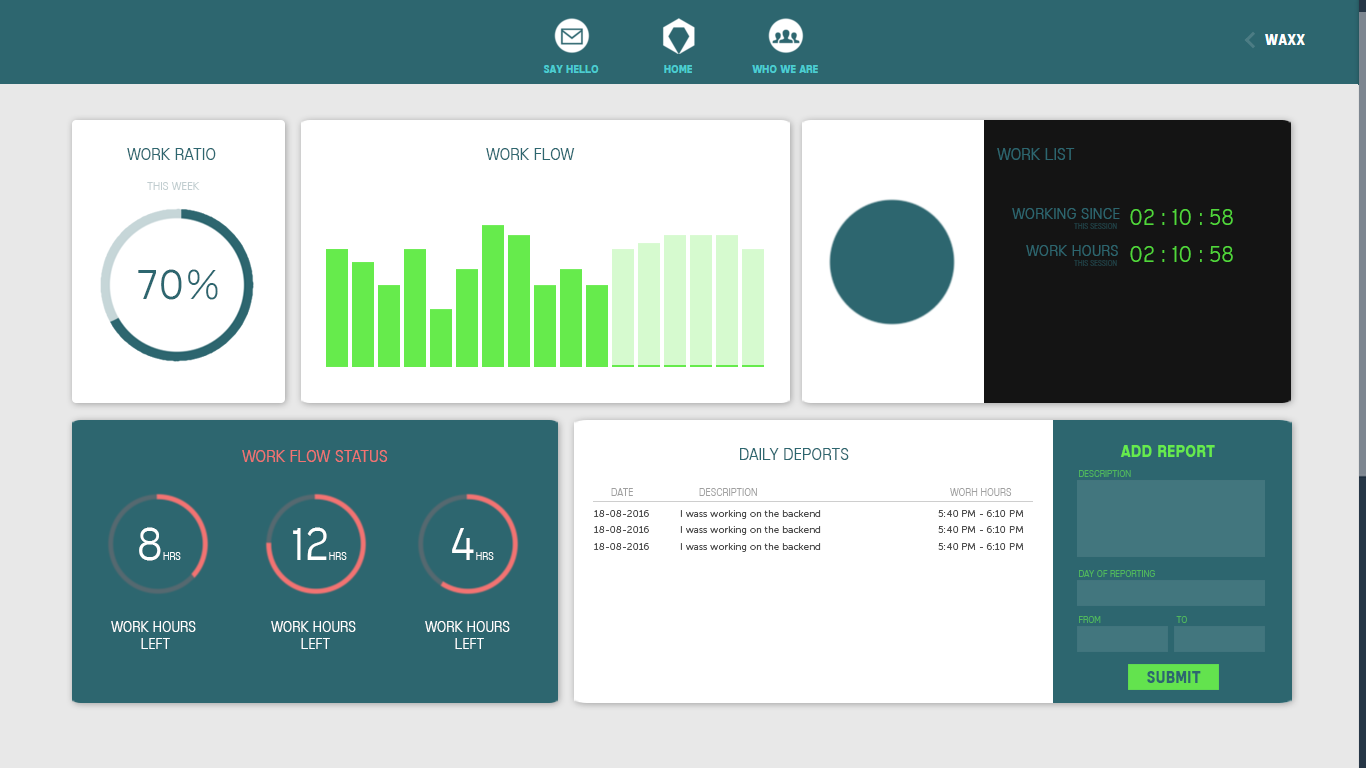
<style>
.page{position:relative;width:1366px;height:768px;background:#ffffff}
.page>*{position:absolute;margin:0}
.t1{font:16px "MixolydianTitlingLt-Regular";color:#2d666f}
.t2{font:11px "MixolydianTitlingLt-Regular";color:#c1cdd0}
.t3{font:15.2px "MixolydianTitlingLt-Regular";color:#2d666f}
.t4{font:21.2px "MixolydianTitlingLt-Regular";color:#51d73b}
.t5{font:7.2px "MixolydianTitlingLt-Regular";color:#203f44}
.t6{font:40.2px "MixolydianTitlingLt-Regular";color:#2d666f}
.t7{font:16px "MixolydianTitlingRg-Bold";color:#66eb4c}
.t8{font:16px "MixolydianTitlingLt-Regular";color:#f37372}
.t9{font:9px "MixolydianTitlingLt-Regular";color:#50b85c}
.t10{font:10px "MixolydianTitlingLt-Regular";color:#a0a0a0}
.t11{font:10px "MuseoSans-300";color:#505050}
.t12{font:10px "MixolydianTitlingLt-Regular";color:#ffffff}
.t13{font:44px "MixolydianTitlingLt-Regular";color:#ffffff}
.t14{font:14px "MixolydianTitlingLt-Regular";color:#ffffff}
.t15{font:16px "MixolydianTitlingRg-Bold";color:#2d666f}
</style>
<div class="page">
<p class="t1" style="left:127px;top:148px;width:89px;height:12px">WORK RATIO</p>
<p class="t1" style="left:486px;top:148px;width:89px;height:12px">WORK FLOW</p>
<p class="t1" style="left:997px;top:148px;width:78px;height:12px">WORK LIST</p>
<p class="t2" style="left:147px;top:182px;width:53px;height:8px">THIS WEEK</p>
<p class="t3" style="left:1012px;top:208px;width:108px;height:11px">WORKING SINCE</p>
<p class="t4" style="left:1130px;top:209px;width:103px;height:16px">02 : 10 : 58</p>
<p class="t5" style="left:1074px;top:223px;width:43px;height:6px">THIS SESSION</p>
<p class="t3" style="left:1026px;top:245px;width:92px;height:11px">WORK HOURS</p>
<p class="t4" style="left:1130px;top:246px;width:103px;height:16px">02 : 10 : 58</p>
<p class="t6" style="left:138px;top:269px;width:80px;height:31px">70%</p>
<p class="t5" style="left:1074px;top:260px;width:43px;height:6px">THIS SESSION</p>
<p class="t1" style="left:740px;top:448px;width:109px;height:12px">DAILY DEPORTS</p>
<p class="t7" style="left:1120px;top:445px;width:95px;height:12px">ADD REPORT</p>
<p class="t8" style="left:242px;top:450px;width:146px;height:12px">WORK FLOW STATUS</p>
<p class="t9" style="left:1079px;top:470px;width:52px;height:7px">DESCRIPTION</p>
<p class="t10" style="left:611px;top:488px;width:22px;height:8px">DATE</p>
<p class="t10" style="left:699px;top:488px;width:58px;height:8px">DESCRIPTION</p>
<p class="t10" style="left:950px;top:488px;width:62px;height:8px">WORH HOURS</p>
<p class="t11" style="left:594px;top:510px;width:55px;height:7px">18-08-2016</p>
<p class="t11" style="left:680px;top:510px;width:141px;height:9px">I wass working on the backend</p>
<p class="t11" style="left:938px;top:510px;width:86px;height:7px">5:40 PM - 6:10 PM</p>
<p class="t12" style="left:139px;top:527px;width:42px;height:34px"><span class="t13">8</span>hrs</p>
<p class="t12" style="left:293px;top:527px;width:54px;height:33px"><span class="t13">12</span>hrs</p>
<p class="t12" style="left:452px;top:528px;width:42px;height:32px"><span class="t13">4</span>hrs</p>
<p class="t11" style="left:594px;top:526px;width:55px;height:7px">18-08-2016</p>
<p class="t11" style="left:680px;top:526px;width:141px;height:9px">I wass working on the backend</p>
<p class="t11" style="left:938px;top:526px;width:86px;height:7px">5:40 PM - 6:10 PM</p>
<p class="t11" style="left:594px;top:543px;width:55px;height:7px">18-08-2016</p>
<p class="t11" style="left:680px;top:543px;width:141px;height:9px">I wass working on the backend</p>
<p class="t11" style="left:938px;top:543px;width:86px;height:7px">5:40 PM - 6:10 PM</p>
<p class="t9" style="left:1079px;top:570px;width:76px;height:7px">DAY OF REPORTING</p>
<p class="t9" style="left:1079px;top:616px;width:22px;height:7px">FROM</p>
<p class="t9" style="left:1176px;top:616px;width:11px;height:7px">TO</p>
<p class="t14" style="left:111px;top:621px;width:85px;height:28px;text-align:center">WORK HOURS <br>LEFT</p>
<p class="t14" style="left:271px;top:621px;width:85px;height:28px;text-align:center">WORK HOURS <br>LEFT</p>
<p class="t14" style="left:425px;top:621px;width:85px;height:28px;text-align:center">WORK HOURS <br>LEFT</p>
<p class="t15" style="left:1147px;top:671px;width:54px;height:12px">SUBMIT</p>
</div>
